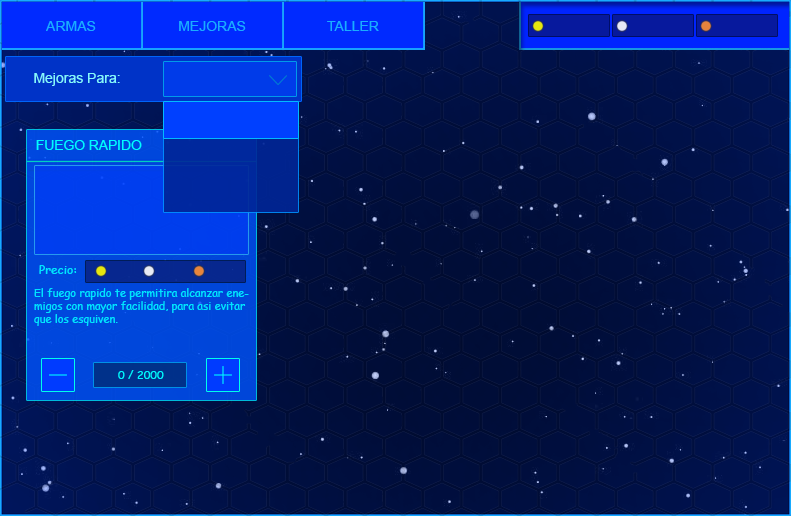
<style>
.page{position:relative;width:791px;height:516px}
.page>*{position:absolute;margin:0}
.t1{font:14px "ArialMT";color:#1aacff}
.t2{font:14px "ArialMT";color:#84f7fb}
.t3{font:13.7px "ArialMT";color:#00fcff}
.t4{font:12px "ComicSansMS";color:#00e4ff}
.t5{font:11px "ComicSansMS";color:#00e4ff}
.t6{font:11px "ComicSansMS";color:#00f6ff}
</style>
<div class="page">
<p class="t1" style="left:46px;top:21px;width:50px;height:10px">ARMAS</p>
<p class="t1" style="left:179px;top:21px;width:67px;height:10px">MEJORAS</p>
<p class="t1" style="left:327px;top:21px;width:52px;height:10px">TALLER</p>
<p class="t2" style="left:34px;top:73px;width:86px;height:13px">Mejoras Para:</p>
<p class="t3" style="left:36px;top:140px;width:106px;height:10px">FUEGO RAPIDO</p>
<p class="t4" style="left:39px;top:265px;width:38px;height:9px">Precio:</p>
<p class="t5" style="left:34px;top:288px;width:215px;height:38px">El fuego rapido te permitira alcanzar ene-<br>migos con mayor facilidad, para asi evitar<br>que los esquiven.</p>
<p class="t6" style="left:118px;top:370px;width:46px;height:9px">0 / 2000</p>
</div>
